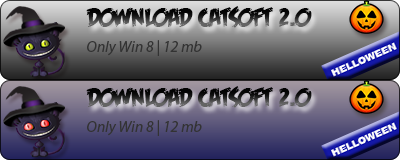
<style>
.page{position:relative;width:400px;height:160px}
.page>*{position:absolute;margin:0}
.t1{font:26.6px "FeastofFleshBB";text-transform:uppercase}
.t2{font:15.6px "MyriadPro-It";color:#333333}
.t3{font:15.6px "MyriadPro-It";color:#333333;text-transform:uppercase}
</style>
<div class="page">
<p class="t1" style="left:86px;top:6px;width:226px;height:22px">Download Catsoft 2.0</p>
<p class="t2" style="left:87px;top:40px;width:115px;height:16px">Only Win<span class="t3"> 8 | 12 </span>mb</p>
<p class="t1" style="left:86px;top:86px;width:226px;height:22px">Download Catsoft 2.0</p>
<p class="t2" style="left:87px;top:120px;width:115px;height:16px">Only Win<span class="t3"> 8 | 12 </span>mb</p>
</div>
